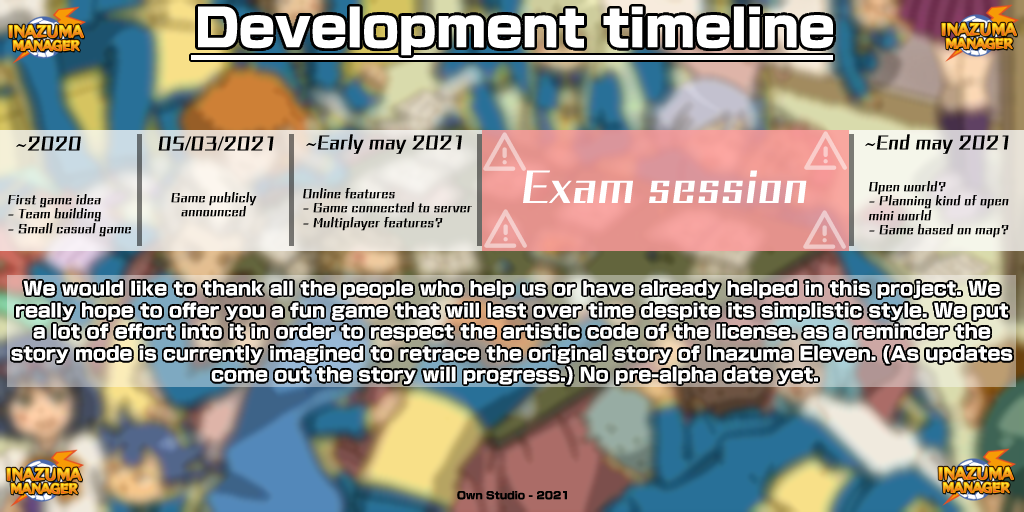
<style>
.page{position:relative;width:1024px;height:512px}
.page>*{position:absolute;margin:0}
.t1{font:50px "NewRodinPro-UB";color:#ffffff}
.t2{font:18px "CometStd-B";color:#000000}
.t3{font:42px "CometStd-B";color:#ffffff}
.t4{font:12px "CometStd-B";color:#000000}
.t5{font:18px "NewRodinPro-UB";color:#ffffff}
.t6{font:10px "NewRodinPro-UB";color:#000000}
</style>
<div class="page">
<p class="t1" style="left:197px;top:6px;width:637px;height:50px">Development timeline</p>
<p class="t2" style="left:16px;top:136px;width:65px;height:15px">~2020</p>
<p class="t2" style="left:158px;top:136px;width:116px;height:15px">05/03/2021</p>
<p class="t2" style="left:306px;top:134px;width:156px;height:20px">~Early may 2021</p>
<p class="t2" style="left:865px;top:134px;width:144px;height:20px">~End may 2021</p>
<p class="t3" style="left:522px;top:170px;width:285px;height:34px">Exam session</p>
<p class="t4" style="left:868px;top:181px;width:141px;height:57px">Open world?<br>- Planning kind of open <br>mini world<br>- Game based on map?</p>
<p class="t4" style="left:8px;top:194px;width:124px;height:43px">First game idea<br>- Team building<br>- Small casual game</p>
<p class="t4" style="left:171px;top:192px;width:86px;height:25px;text-align:center">Game publicly<br>announced</p>
<p class="t4" style="left:303px;top:188px;width:170px;height:43px">Online features<br>- Game connected to server<br>- Multiplayer features?</p>
<p class="t5" style="left:11px;top:280px;width:1002px;height:105px;text-align:center">We would like to thank all the people who help us or have already helped in this project. We <br>really hope to offer you a fun game that will last over time despite its simplistic style. We put <br>a lot of effort into it in order to respect the artistic code of the license. as a reminder the <br>story mode is currently imagined to retrace the original story of Inazuma Eleven. (As updates <br>come out the story will progress.) No pre-alpha date yet.</p>
<p class="t6" style="left:457px;top:490px;width:110px;height:10px">Own Studio - 2021</p>
</div>
